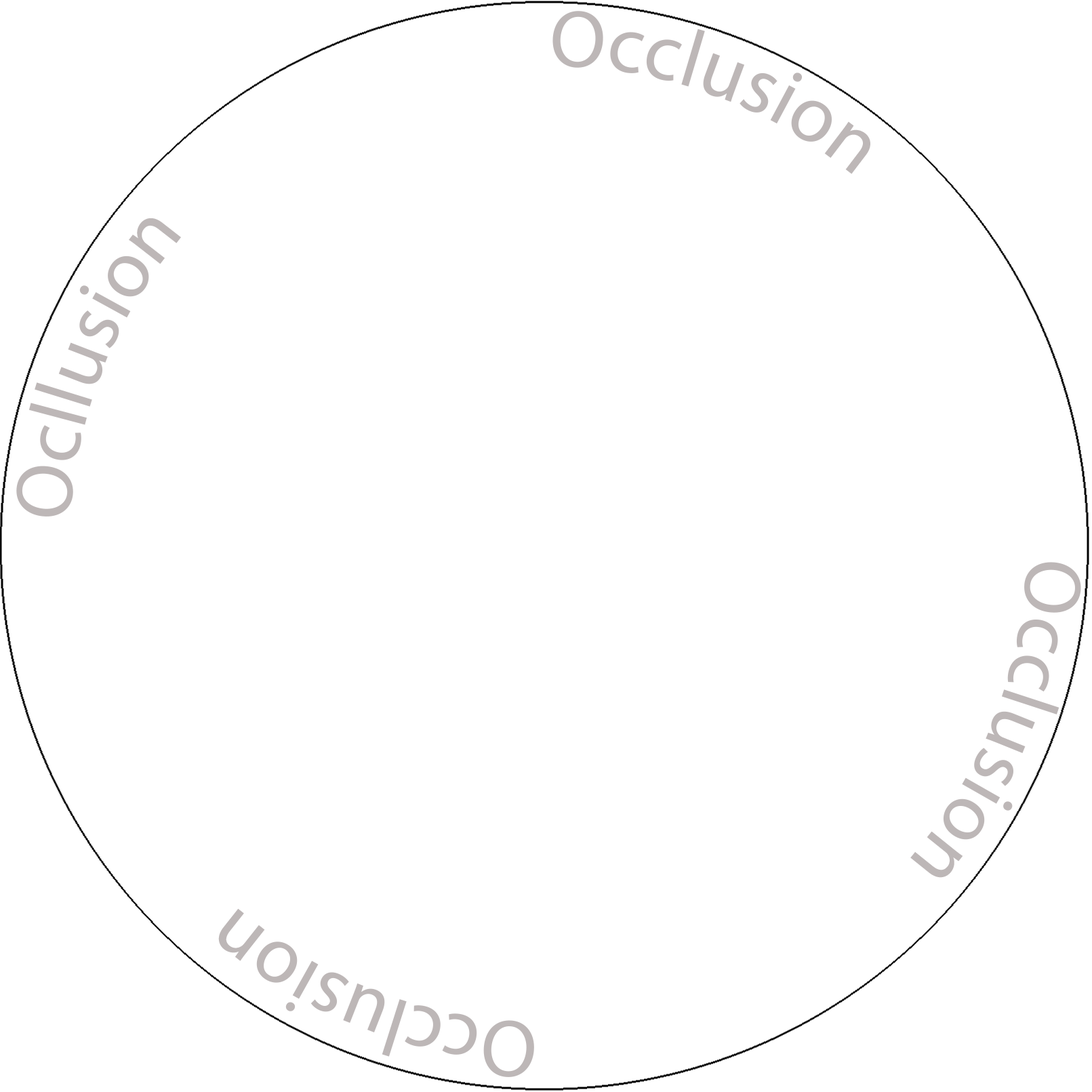
<style>
.page{position:relative;width:1092px;height:1092px;background:#ffffff}
.page>*{position:absolute;margin:0}
.t1{font:81.3px "MyriadPro-Regular";color:#bdb7b7}
</style>
<div class="page">
<p class="t1" style="left:16px;top:11px;width:1065px;height:1066px">Occlusion                         Occlusion                        Occlusion                         Ocllusion</p>
</div>
